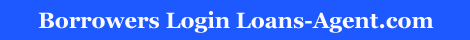
<style>
.page{position:relative;width:470px;height:40px;background:#1e59ff}
.page>*{position:absolute;margin:0}
.t1{font:22px "Georgia-Bold";color:#fbfaff}
</style>
<div class="page">
<p class="t1" style="left:38px;top:11px;width:396px;height:22px">Borrowers Login Loans-Agent.com</p>
</div>
